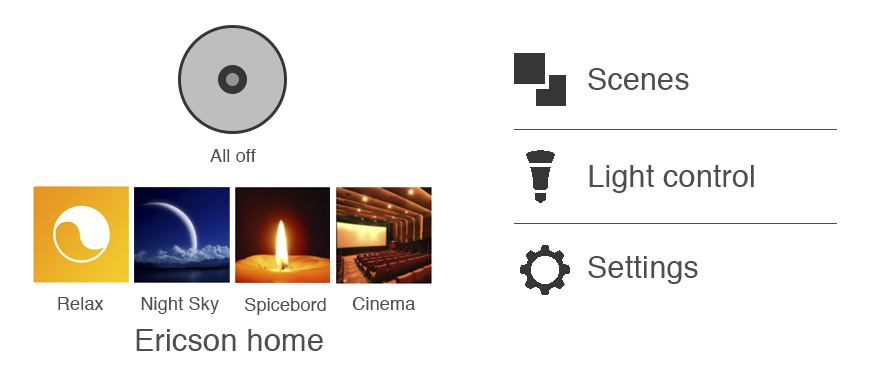
<style>
.page{position:relative;width:887px;height:382px;background:#ffffff}
.page>*{position:absolute;margin:0}
.t1{font:30.2px "Helvetica";letter-spacing:0.01em;color:#4e4e4e}
.t2{font:18px "Helvetica";letter-spacing:0.01em;color:#4e4e4e}
.t3{font:30.5px "Helvetica";letter-spacing:0.01em;color:#4e4e4e}
</style>
<div class="page">
<p class="t1" style="left:588px;top:68px;width:101px;height:22px">Scenes</p>
<p class="t2" style="left:210px;top:149px;width:46px;height:13px">All off</p>
<p class="t1" style="left:589px;top:165px;width:165px;height:28px">Light control</p>
<p class="t1" style="left:588px;top:256px;width:110px;height:28px">Settings</p>
<p class="t2" style="left:58px;top:297px;width:46px;height:13px">Relax</p>
<p class="t2" style="left:141px;top:297px;width:78px;height:17px">Night Sky</p>
<p class="t2" style="left:245px;top:298px;width:81px;height:17px">Spicebord</p>
<p class="t2" style="left:352px;top:297px;width:63px;height:13px">Cinema</p>
<p class="t3" style="left:136px;top:329px;width:187px;height:22px">Ericson home</p>
</div>
